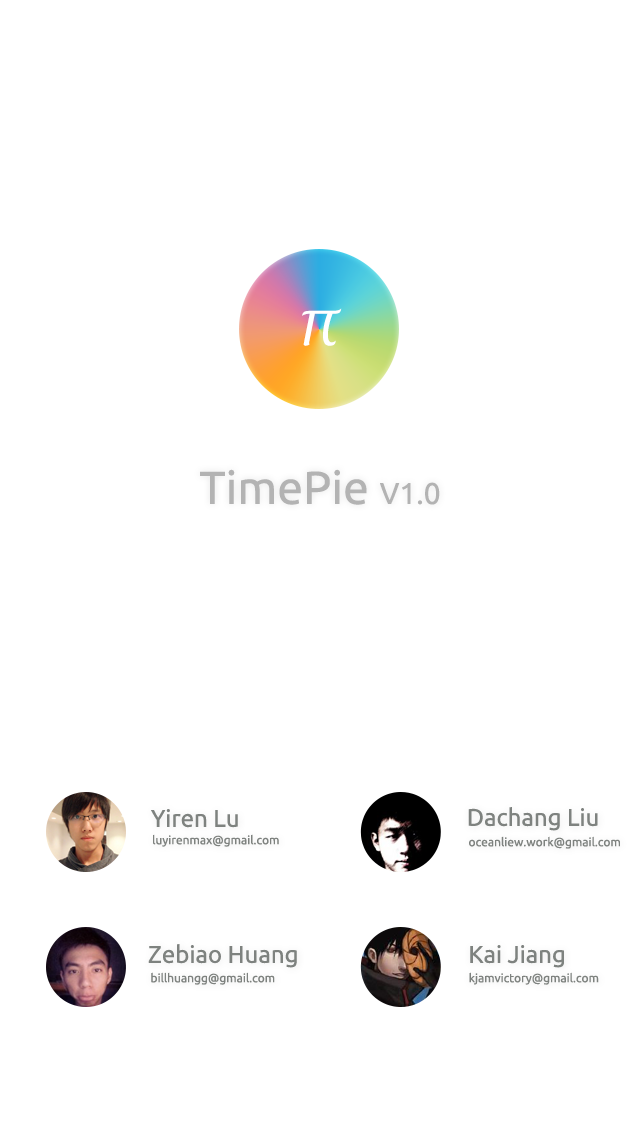
<style>
.page{position:relative;width:640px;height:1136px;background:#ffffff}
.page>*{position:absolute;margin:0}
.t1{font:46.4px "Ubuntu";color:#9e9e9e}
.t2{font:30px "Ubuntu";color:#9e9e9e}
.t3{font:24px "Ubuntu";color:#7e827f}
.t4{font:12px "Ubuntu";color:#7e827f}
</style>
<div class="page">
<p class="t1" style="left:200px;top:469px;width:240px;height:36px">TimePie <span class="t2">V1.0</span></p>
<p class="t3" style="left:151px;top:809px;width:87px;height:19px">Yiren Lu</p>
<p class="t3" style="left:468px;top:807px;width:130px;height:24px">Dachang Liu</p>
<p class="t4" style="left:153px;top:834px;width:126px;height:13px">luyirenmax@gmail.com</p>
<p class="t4" style="left:469px;top:836px;width:151px;height:13px">oceanliew.work@gmail.com</p>
<p class="t3" style="left:148px;top:944px;width:149px;height:24px">Zebiao Huang</p>
<p class="t3" style="left:470px;top:945px;width:94px;height:23px">Kai Jiang</p>
<p class="t4" style="left:151px;top:972px;width:124px;height:13px">billhuangg@gmail.com</p>
<p class="t4" style="left:469px;top:972px;width:130px;height:13px">kjamvictory@gmail.com</p>
</div>
